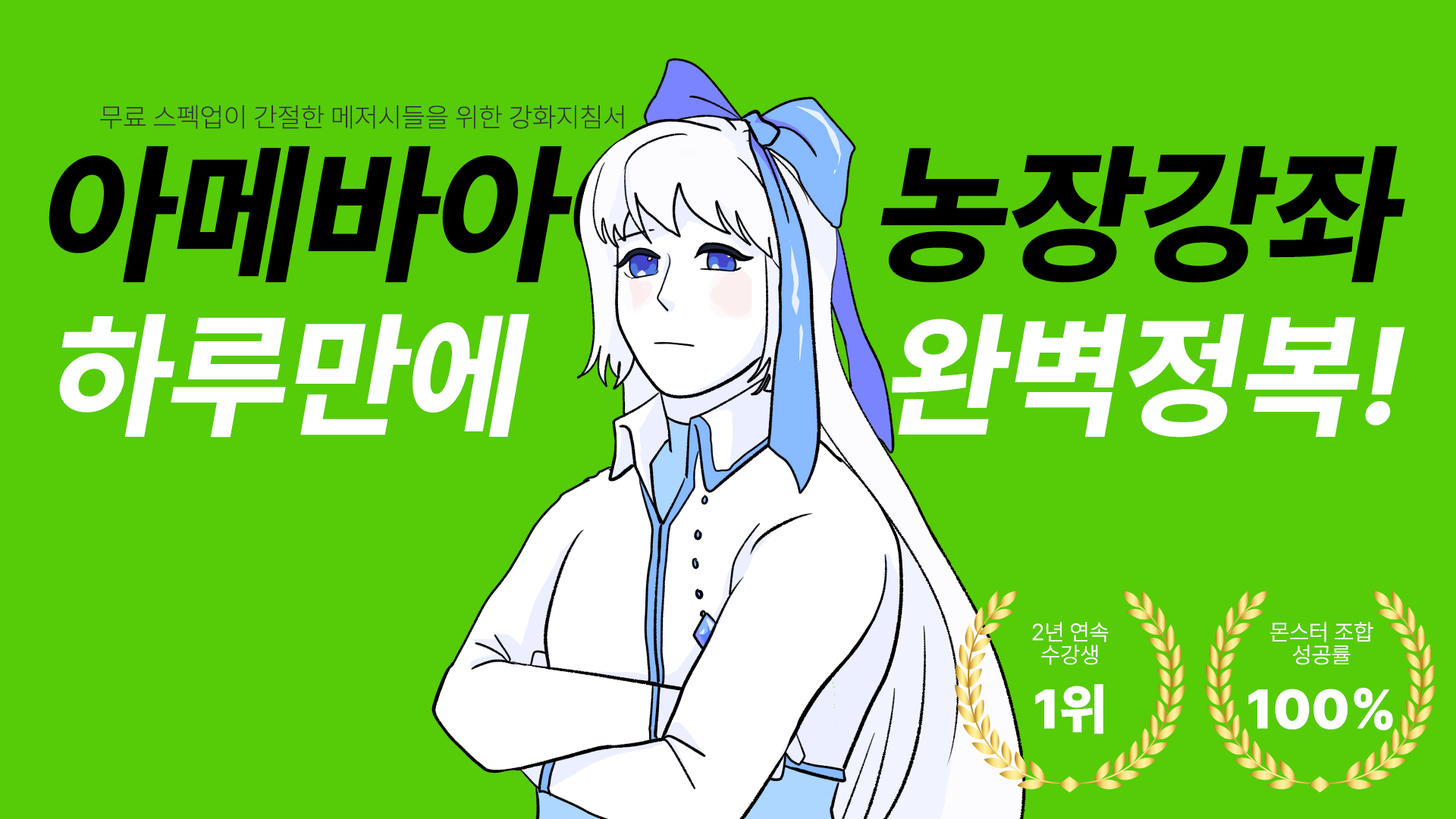
<style>
.page{position:relative;width:1456px;height:819px;background:#56cb08}
.page>*{position:absolute;margin:0}
.t1{font:27.3px "Pretendard-ExtraLight";color:#333333}
.t2{font:151.7px "Pretendard-ExtraBold";color:#000000;text-transform:uppercase;font-style:italic}
.t3{font:136.5px "Pretendard-ExtraBold";color:#ffffff;text-transform:uppercase;font-style:italic}
.t4{font:22.7px/22.7px "Pretendard-Light";color:#ffffff}
.t5{font:54.6px "Pretendard-Black";color:#ffffff}
</style>
<div class="page">
<p class="t1" style="left:100px;top:105px;width:524px;height:24px">무료 스펙업이 간절한 메저시들을 위한 강화지침서</p>
<p class="t2" style="left:49px;top:146px;width:655px;height:137px">아메바아아</p>
<p class="t2" style="left:880px;top:146px;width:525px;height:137px">농장강좌</p>
<p class="t3" style="left:59px;top:314px;width:470px;height:124px">하루만에</p>
<p class="t3" style="left:892px;top:314px;width:513px;height:124px">완벽정복!</p>
<p class="t4" style="left:1032px;top:622px;width:77px;height:112px;text-align:center">2년 연속<br>수강생<br><span class="t5">1위</span></p>
<p class="t4" style="left:1248px;top:622px;width:145px;height:108px;text-align:center">몬스터 조합<br>성공률<br><span class="t5">100%</span></p>
</div>
